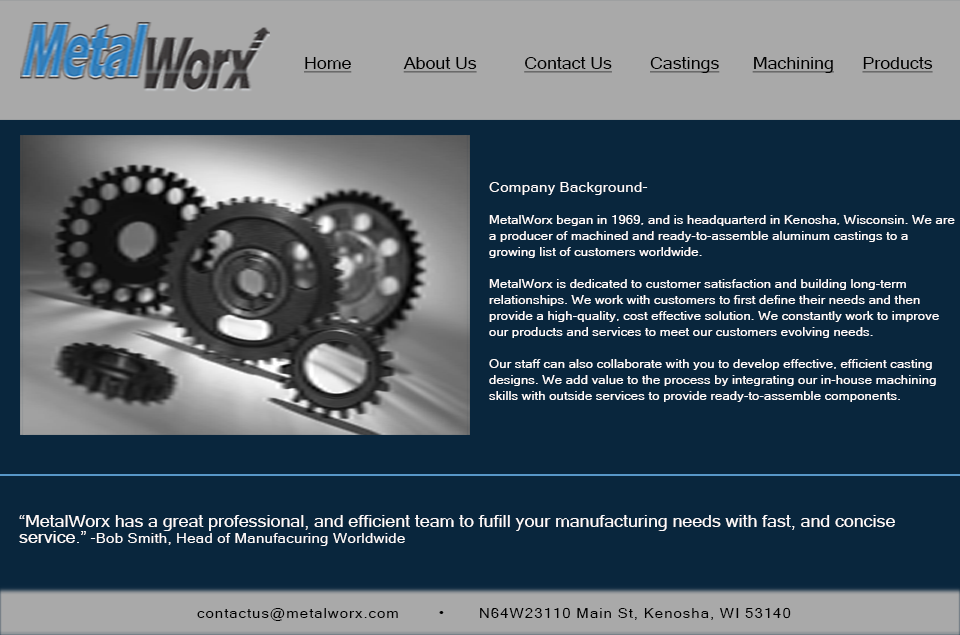
<style>
.page{position:relative;width:960px;height:635px;background:#09263d}
.page>*{position:absolute;margin:0}
.t1{font:16px "MicrosoftSansSerif";letter-spacing:0.005em;color:#000000;text-decoration:underline;scale:1.1 1}
.t2{font:12px/16px "MicrosoftSansSerif";letter-spacing:0.005em;color:#fffbfb;scale:1.1 1}
.t3{font:14px/16px "MicrosoftSansSerif";letter-spacing:0.005em;color:#fffbfb;scale:1.1 1}
.t4{font:16px/16px "MicrosoftSansSerif";letter-spacing:0.005em;color:#fffbfb;scale:1.1 1}
.t5{font:14px "MicrosoftSansSerif";letter-spacing:0.05em;color:#000000;scale:1.1 1}
</style>
<div class="page">
<p class="t1" style="left:304px;top:57px;width:629px;height:16px">Home           About Us          Contact Us        Castings       Machining      Products</p>
<p class="t2" style="left:489px;top:182px;width:466px;height:220px"><span class="t3">Company Background-<br></span><br>MetalWorx began in 1969, and is headquarterd in Kenosha, Wisconsin. We are <br>a producer of machined and ready-to-assemble aluminum castings to a <br>growing list of customers worldwide.<br><br>MetalWorx is dedicated to customer satisfaction and building long-term <br>relationships. We work with customers to first define their needs and then <br>provide a high-quality, cost effective solution. We constantly work to improve <br>our products and services to meet our customers evolving needs.<br><br>Our staff can also collaborate with you to develop effective, efficient casting<br>designs. We add value to the process by integrating our in-house machining<br>skills with outside services to provide ready-to-assemble components.</p>
<p class="t4" style="left:19px;top:515px;width:876px;height:31px">“MetalWorx has a great professional, and efficient team to fufill your manufacturing needs with fast, and concise<br>service.”<span class="t3"> -Bob Smith, Head of Manufacuring Worldwide</span></p>
<p class="t5" style="left:197px;top:607px;width:594px;height:14px">contactus@metalworx.com        •       N64W23110 Main St, Kenosha, WI 53140</p>
</div>
